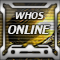
<style>
.page{position:relative;width:60px;height:60px}
.page>*{position:absolute;margin:0}
.t1{font:11px "Biathlon";color:#ffffff}
.t2{font:14px "Biathlon";color:#ffffff}
</style>
<div class="page">
<p class="t1" style="left:15px;top:12px;width:29px;height:7px">WHOS</p>
<p class="t2" style="left:8px;top:25px;width:42px;height:9px">ONLINE</p>
</div>
